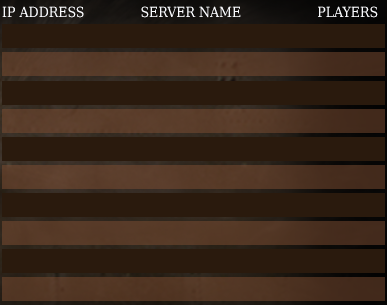
<style>
.page{position:relative;width:387px;height:305px;background:#2a1a0d}
.page>*{position:absolute;margin:0}
.t1{font:14px "DejaVuSerifCondensed";color:#f9fafd}
</style>
<div class="page">
<p class="t1" style="left:2px;top:6px;width:376px;height:12px">IP ADDRESS              SERVER NAME                   PLAYERS</p>
</div>
